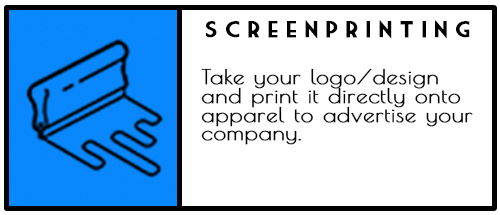
<style>
.page{position:relative;width:500px;height:215px;background:#ffffff}
.page>*{position:absolute;margin:0}
.t1{font:22.1px "MarketDeco";letter-spacing:0.26em;color:#000000;font-weight:bold;scale:1.13 1}
.t2{font:20.1px "PoiretOne-Regular";letter-spacing:0.02em;color:#000000;font-weight:bold;scale:1.13 1}
</style>
<div class="page">
<p class="t1" style="left:206px;top:20px;width:264px;height:18px">Screenprinting</p>
<p class="t2" style="left:201px;top:68px;width:272px;height:77px">Take your logo/design<br>and print it directly onto<br>apparel to advertise your<br>company.</p>
</div>
